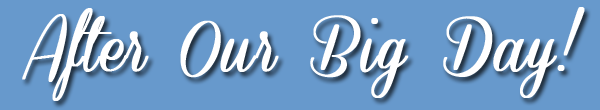
<style>
.page{position:relative;width:600px;height:110px;background:#6799cc}
.page>*{position:absolute;margin:0}
.t1{font:60px "ConeriaScriptDemo";color:#ffffff;font-weight:bold}
</style>
<div class="page">
<p class="t1" style="left:22px;top:7px;width:563px;height:94px">After Our Big Day!</p>
</div>
